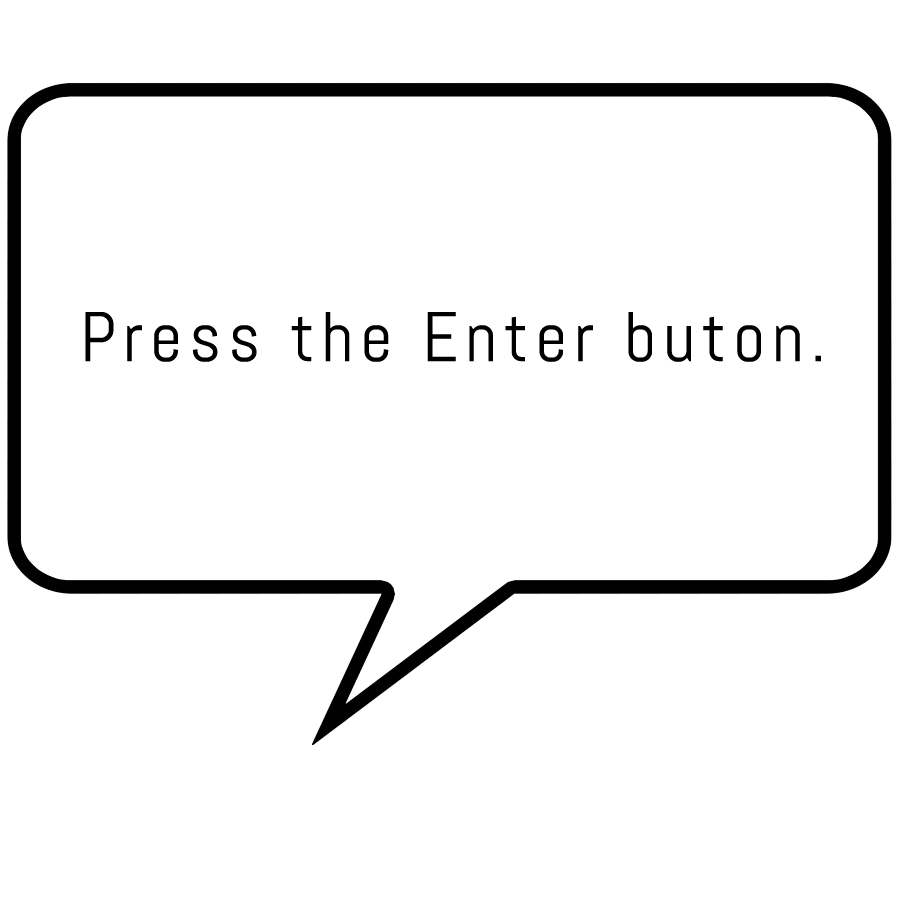
<style>
.page{position:relative;width:900px;height:900px;background:#ffffff}
.page>*{position:absolute;margin:0}
.t1{font:70px "Abel-Regular";letter-spacing:0.1em;color:#000000}
</style>
<div class="page">
<p class="t1" style="left:85px;top:312px;width:736px;height:50px">Press the Enter buton.</p>
</div>
